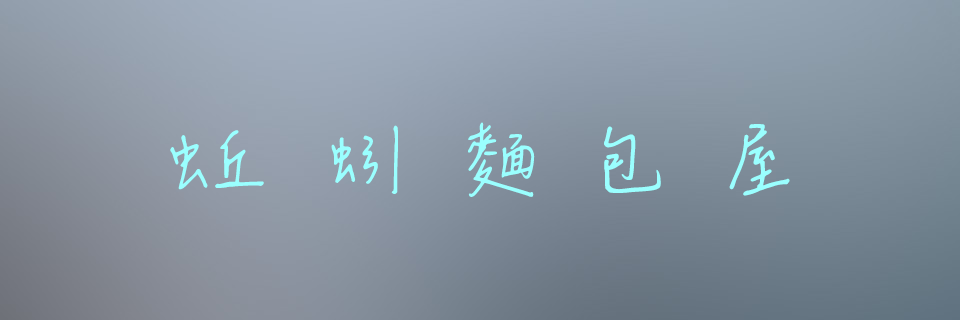
<style>
.page{position:relative;width:960px;height:320px}
.page>*{position:absolute;margin:0}
.t1{font:100px "ChenYuluoyan-Thin";color:#9affff}
</style>
<div class="page">
<p class="t1" style="left:170px;top:122px;width:620px;height:75px">蚯　蚓　麵　包　屋</p>
</div>
